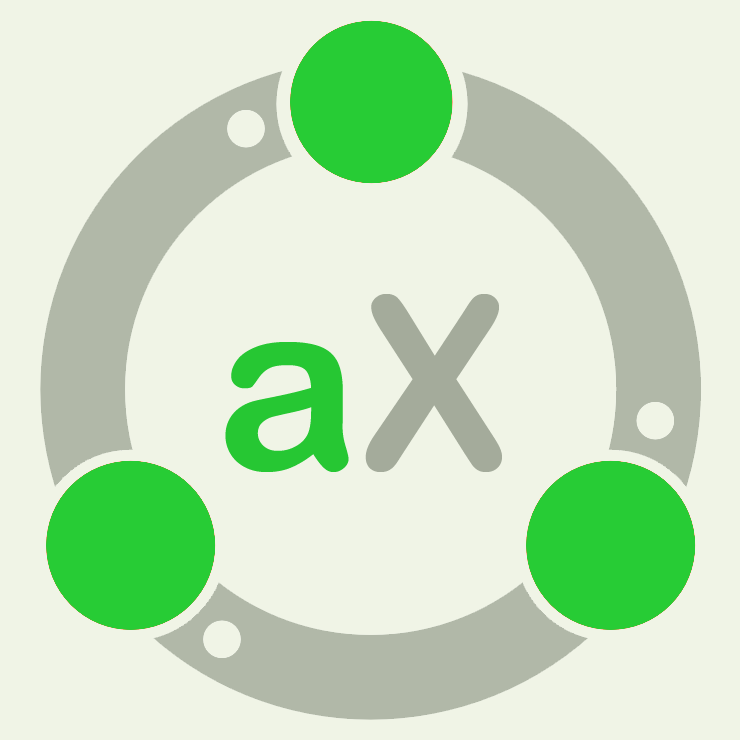
<style>
.page{position:relative;width:740px;height:740px;background:#f0f4e6}
.page>*{position:absolute;margin:0}
.t1{font:240px "ArialRoundedMTBold";letter-spacing:0.021em;color:#26c733}
.t2{font:240px "ArialRoundedMTBold";letter-spacing:0.021em;color:#a4ab9b}
</style>
<div class="page">
<p class="t1" style="left:225px;top:294px;width:277px;height:178px">a<span class="t2">X</span></p>
</div>
